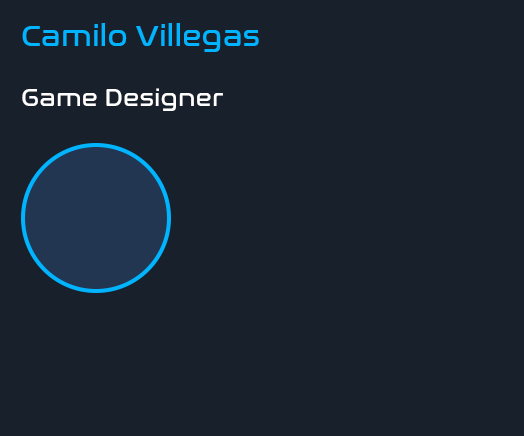
<style>
.page{position:relative;width:524px;height:436px;background:#18202b}
.page>*{position:absolute;margin:0}
.t1{font:30px "NasalizationRg-Regular";color:#00b4ff}
.t2{font:25px "NasalizationRg-Regular";color:#ffffff}
</style>
<div class="page">
<p class="t1" style="left:22px;top:23px;width:237px;height:88px;text-align:justify">Camilo Villegas<br><span class="t2"><br>Game Designer</span></p>
</div>
